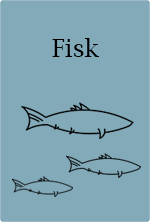
<style>
.page{position:relative;width:150px;height:222px;background:#83aab9}
.page>*{position:absolute;margin:0}
.t1{font:24px "LucidaBright";color:#000000}
.t2{font:36px "LucidaBright";color:#000000}
</style>
<div class="page">
<p class="t1" style="left:52px;top:38px;width:47px;height:19px"><span class="t2"><br></span>Fisk</p>
</div>
